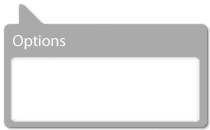
<style>
.page{position:relative;width:210px;height:130px;background:#ffffff}
.page>*{position:absolute;margin:0}
.t1{font:16px "MyriadPro-Regular";color:#ffffff}
</style>
<div class="page">
<p class="t1" style="left:13px;top:35px;width:53px;height:15px">Options</p>
</div>
